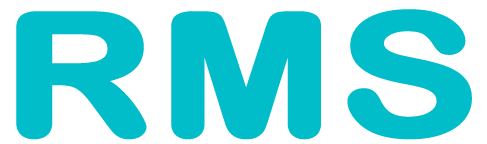
<style>
.page{position:relative;width:487px;height:144px;background:#00bdc9}
.page>*{position:absolute;margin:0}
.t1{font:169.9px "ArialRoundedMTBold";color:#00bdc9;font-weight:bold;scale:1.23 1}
</style>
<div class="page">
<p class="t1" style="left:16px;top:9px;width:456px;height:131px">RMS</p>
</div>
